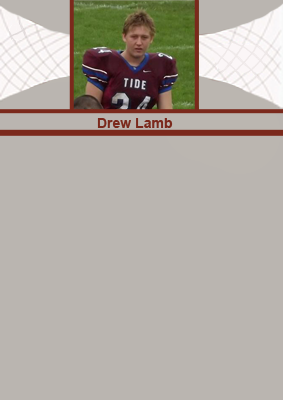
<style>
.page{position:relative;width:283px;height:400px;background:#bab5b0}
.page>*{position:absolute;margin:0}
.t1{font:14px "Arial-BoldMT";color:#7b291c}
</style>
<div class="page">
<p class="t1" style="left:97px;top:118px;width:76px;height:10px">Drew Lamb</p>
</div>
